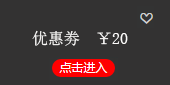
<style>
.page{position:relative;width:170px;height:85px;background:#333232}
.page>*{position:absolute;margin:0}
.t1{font:16px "SimSun";color:#fdfcfb}
</style>
<div class="page">
<p class="t1" style="left:32px;top:30px;width:96px;height:16px">优惠劵  ￥20</p>
</div>
